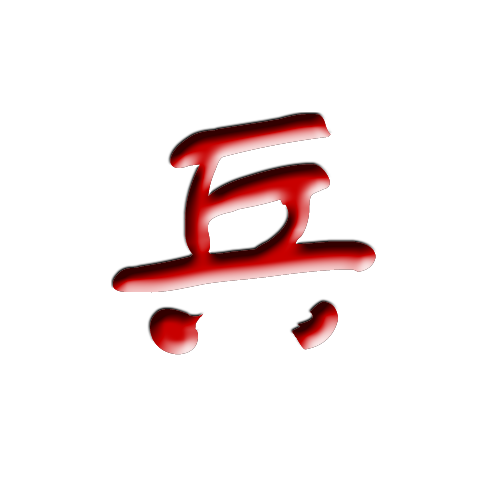
<style>
.page{position:relative;width:500px;height:500px;background:#ffffff}
.page>*{position:absolute;margin:0}
.t1{font:320px "FZSTK--GBK1-0"}
</style>
<div class="page">
<p class="t1" style="left:113px;top:114px;width:263px;height:241px">兵</p>
</div>
